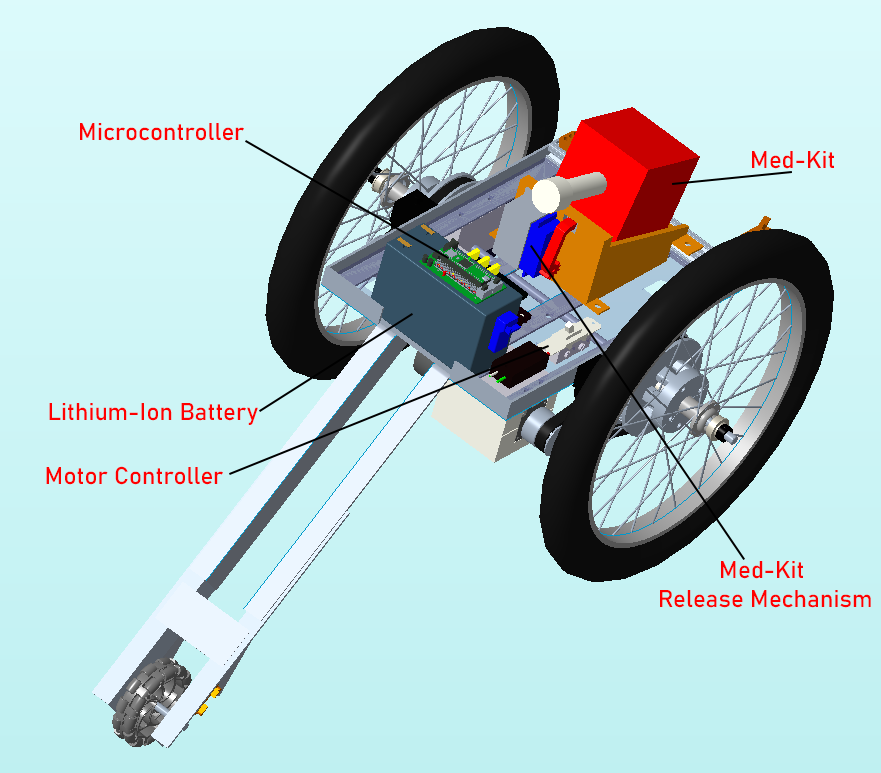
<style>
.page{position:relative;width:881px;height:773px}
.page>*{position:absolute;margin:0}
.t1{font:24px "Bahnschrift";color:#ff0000}
</style>
<div class="page">
<p class="t1" style="left:80px;top:123px;width:164px;height:18px">Microcontroller</p>
<p class="t1" style="left:752px;top:151px;width:82px;height:18px">Med-Kit</p>
<p class="t1" style="left:49px;top:403px;width:209px;height:22px">Lithium-Ion Battery</p>
<p class="t1" style="left:46px;top:466px;width:177px;height:19px">Motor Controller</p>
<p class="t1" style="left:660px;top:561px;width:211px;height:47px;text-align:center">Med-Kit<br> Release Mechanism</p>
</div>
